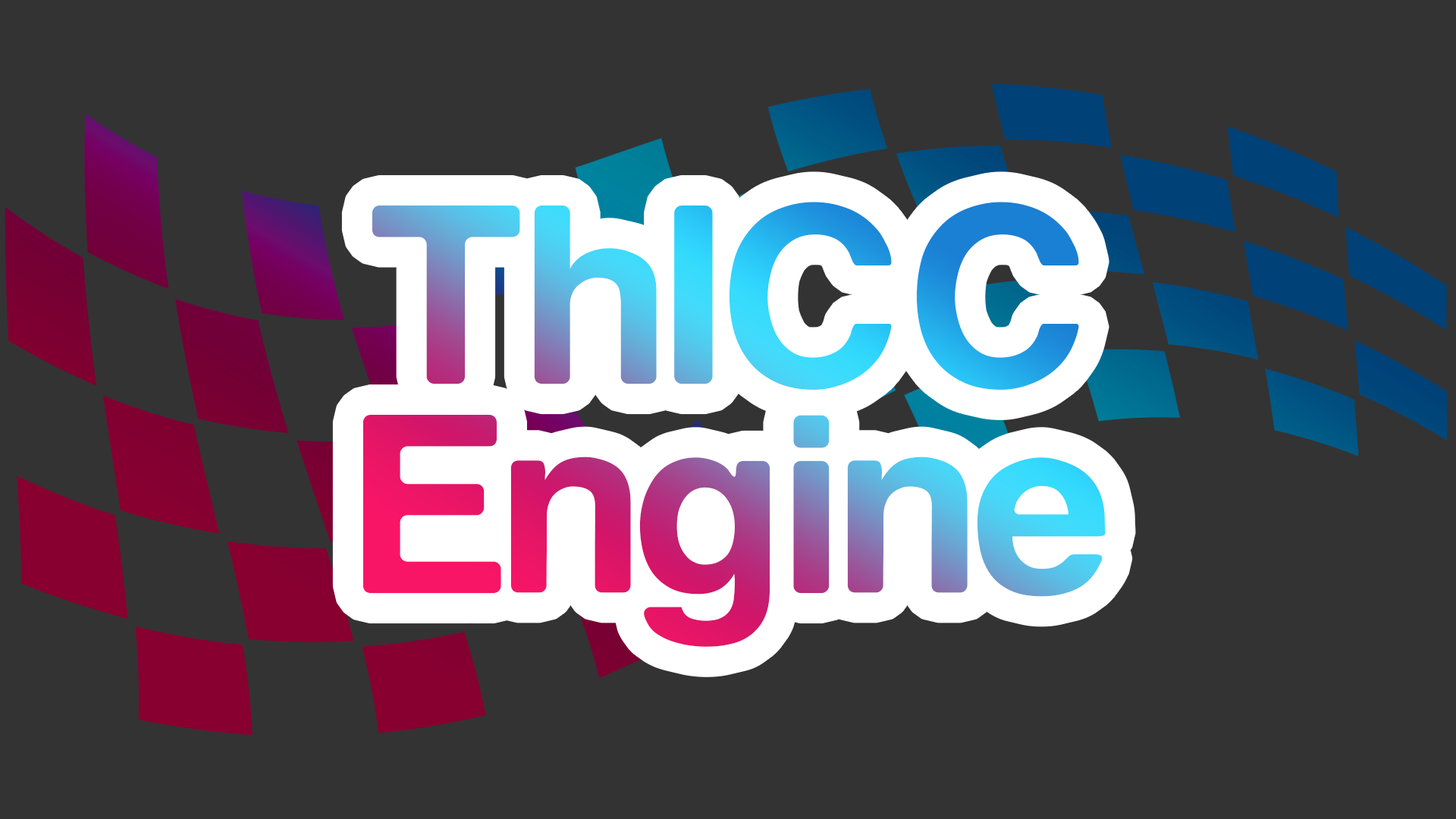
<style>
.page{position:relative;width:1456px;height:819px;background:#333333}
.page>*{position:absolute;margin:0}
.t1{font:255.6px/209.3px "Isolation"}
</style>
<div class="page">
<p class="t1" style="left:362px;top:202px;width:744px;height:445px;text-align:center">ThICC<br>Engine</p>
</div>
